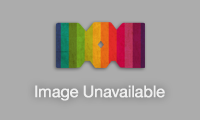
<style>
.page{position:relative;width:200px;height:120px;background:#acacac}
.page>*{position:absolute;margin:0}
.t1{font:16px "HelveticaNeue";letter-spacing:-0.025em;color:#eeeeee;font-weight:bold}
</style>
<div class="page">
<p class="t1" style="left:35px;top:85px;width:130px;height:16px">Image Unavailable</p>
</div>
